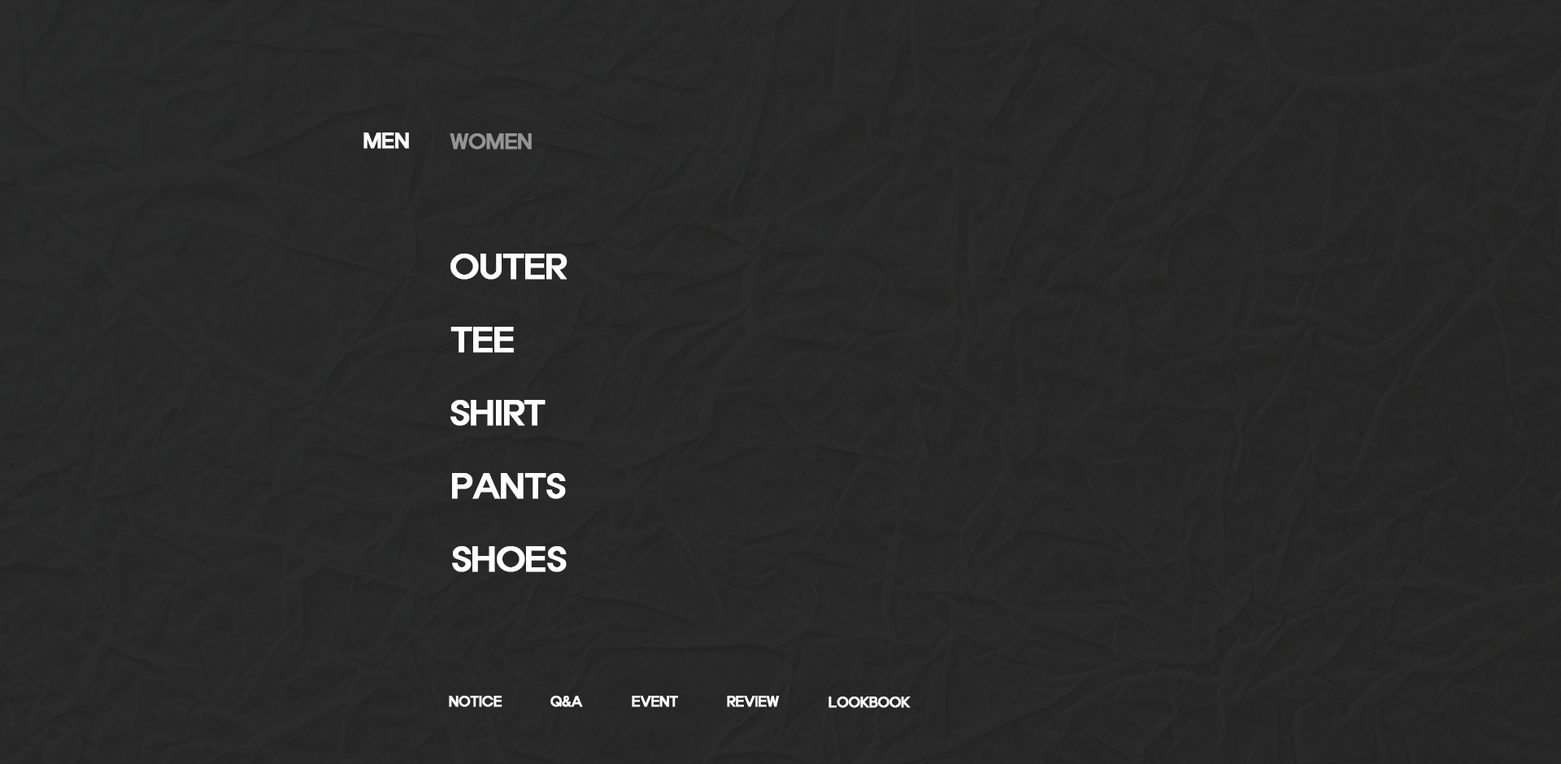
<style>
.page{position:relative;width:1561px;height:764px}
.page>*{position:absolute;margin:0}
.t1{font:19.5px "ExpoM-HM";letter-spacing:-0.025em;color:#ffffff;font-weight:bold}
.t2{font:19.5px "ExpoM-HM";letter-spacing:-0.025em;color:#949494;font-weight:bold}
.t3{font:32.5px "ExpoM-HM";letter-spacing:-0.025em;color:#ffffff;font-weight:bold}
.t4{font:13px "ExpoM-HM";letter-spacing:-0.025em;color:#ffffff;font-weight:bold}
</style>
<div class="page">
<p class="t1" style="left:363px;top:132px;width:46px;height:17px">MEN</p>
<p class="t2" style="left:449px;top:133px;width:83px;height:17px">WOMEN</p>
<p class="t3" style="left:450px;top:254px;width:117px;height:26px">OUTER</p>
<p class="t3" style="left:450px;top:327px;width:64px;height:26px">TEE</p>
<p class="t3" style="left:450px;top:400px;width:95px;height:26px">SHIRT</p>
<p class="t3" style="left:452px;top:473px;width:114px;height:26px">PANTS</p>
<p class="t3" style="left:452px;top:546px;width:115px;height:26px">SHOES</p>
<p class="t4" style="left:449px;top:696px;width:53px;height:11px">NOTICE</p>
<p class="t4" style="left:550px;top:696px;width:33px;height:11px">Q&amp;A</p>
<p class="t4" style="left:632px;top:696px;width:46px;height:11px">EVENT</p>
<p class="t4" style="left:727px;top:696px;width:53px;height:11px">REVIEW</p>
<p class="t4" style="left:828px;top:697px;width:82px;height:11px">LOOKBOOK</p>
</div>
